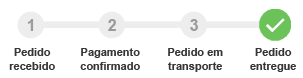
<style>
.page{position:relative;width:303px;height:78px;background:#ffffff}
.page>*{position:absolute;margin:0}
.t1{font:16px "Arial-BoldMT";color:#9b9b9b}
.t2{font:11px "Arial-BoldMT";color:#363636}
</style>
<div class="page">
<p class="t1" style="left:27px;top:19px;width:7px;height:12px">1</p>
<p class="t1" style="left:108px;top:19px;width:8px;height:12px">2</p>
<p class="t1" style="left:190px;top:19px;width:8px;height:12px">3</p>
<p class="t2" style="left:9px;top:48px;width:46px;height:22px;text-align:center">Pedido<br>recebido</p>
<p class="t2" style="left:80px;top:48px;width:60px;height:22px;text-align:center">Pagamento<br>confirmado</p>
<p class="t2" style="left:168px;top:48px;width:55px;height:24px;text-align:center">Pedido em<br>transporte</p>
<p class="t2" style="left:250px;top:48px;width:46px;height:24px;text-align:center">Pedido<br>entregue</p>
</div>
